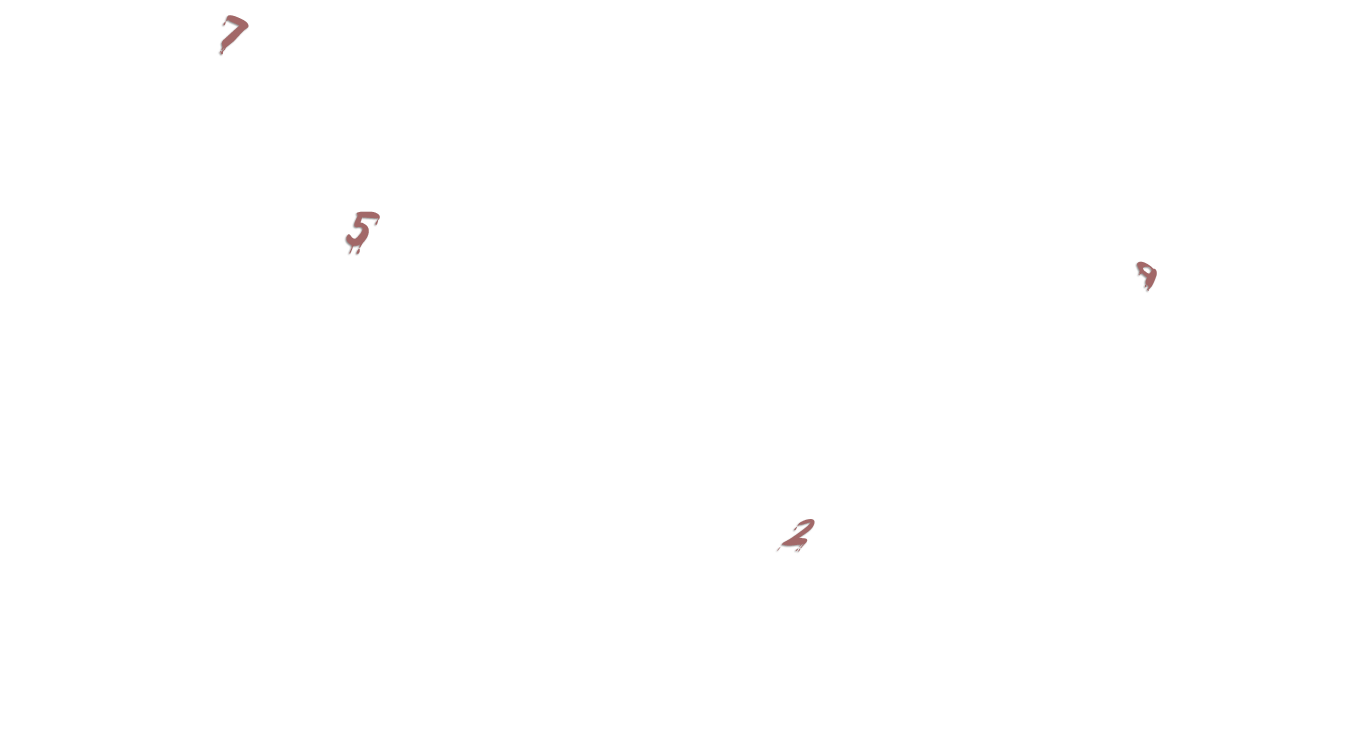
<style>
.page{position:relative;width:1366px;height:744px;background:#ffffff}
.page>*{position:absolute;margin:0}
.t1{font:43.2px "Bloody";color:#a26868;scale:0.89 1}
.t2{font:48.2px "Bloody";color:#a26868;scale:0.89 1}
.t3{font:24.4px "Bloody";color:#a26868;scale:1.99 1}
.t4{font:43.7px "Bloody";color:#a26868;scale:0.79 1}
</style>
<div class="page">
<p class="t1" style="left:219px;top:15px;width:30px;height:40px;rotate:24deg">7</p>
<p class="t2" style="left:346px;top:211px;width:34px;height:43px;rotate:4deg">5</p>
<p class="t3" style="left:1137px;top:261px;width:20px;height:30px;rotate:34deg">9</p>
<p class="t4" style="left:777px;top:519px;width:38px;height:33px;rotate:-3deg">2</p>
</div>
